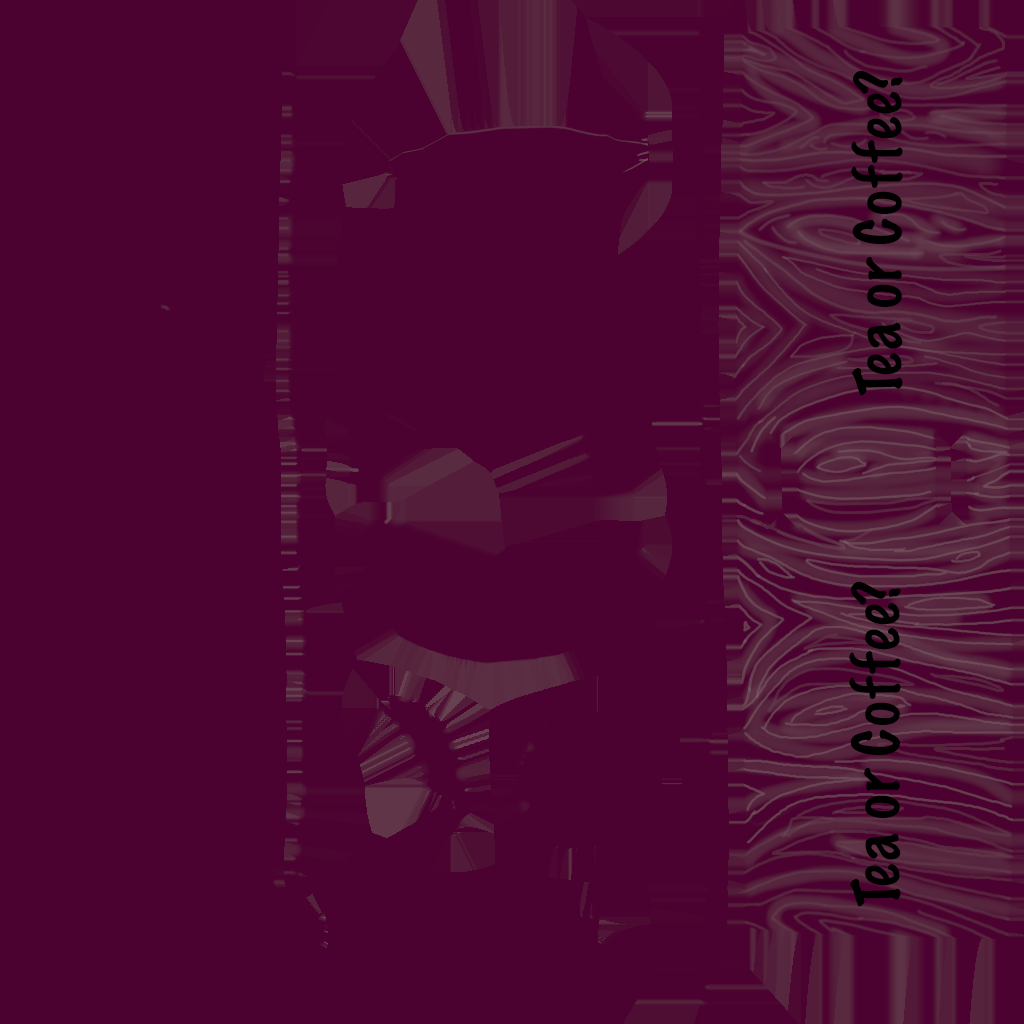
<style>
.page{position:relative;width:1024px;height:1024px;background:#4c0230}
.page>*{position:absolute;margin:0}
.t1{font:58.5px "MarkerFelt-Thin";color:#000000}
</style>
<div class="page">
<p class="t1" style="left:851px;top:70px;width:52px;height:326px;rotate:-90deg">Tea or Coffee?</p>
<p class="t1" style="left:849px;top:581px;width:52px;height:326px;rotate:-90deg">Tea or Coffee?</p>
</div>
